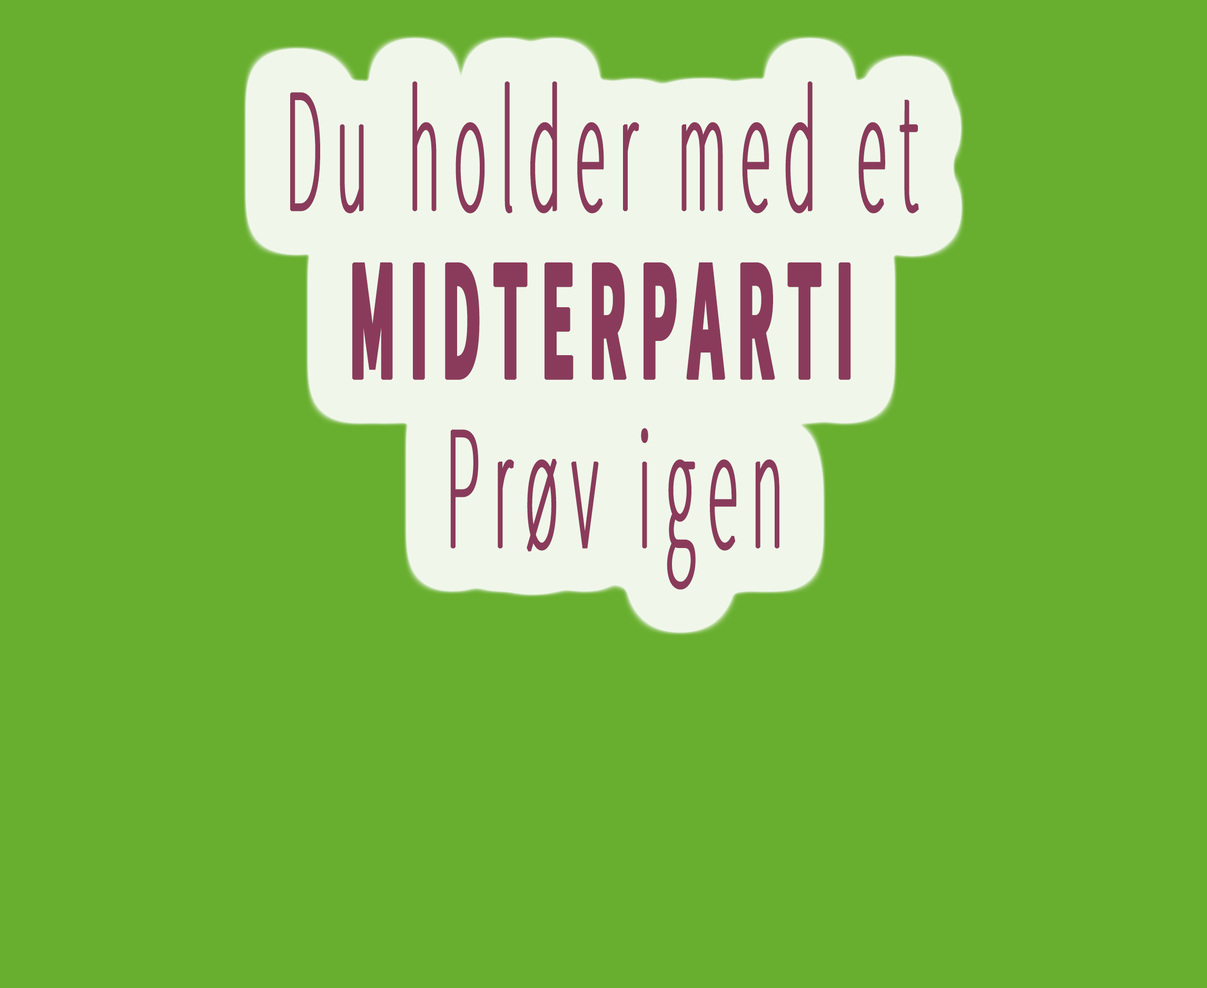
<style>
.page{position:relative;width:1207px;height:988px;background:#68af2f}
.page>*{position:absolute;margin:0}
.t1{font:175.6px "SourceSansPro-ExtraLight";letter-spacing:0.2em;color:#8a3b5b;font-weight:bold;scale:0.35 1}
.t2{font:175.6px "SourceSansPro-Bold";letter-spacing:0.2em;color:#8a3b5b;font-weight:bold;scale:0.35 1}
</style>
<div class="page">
<p class="t1" style="left:290px;top:81px;width:629px;height:508px;text-align:center">Du holder med et <br><br><br><br><br><br><br><br><span class="t2">MIDTERPARTI <br><br><br><br></span><br><br><br><br>Prøv igen</p>
</div>
